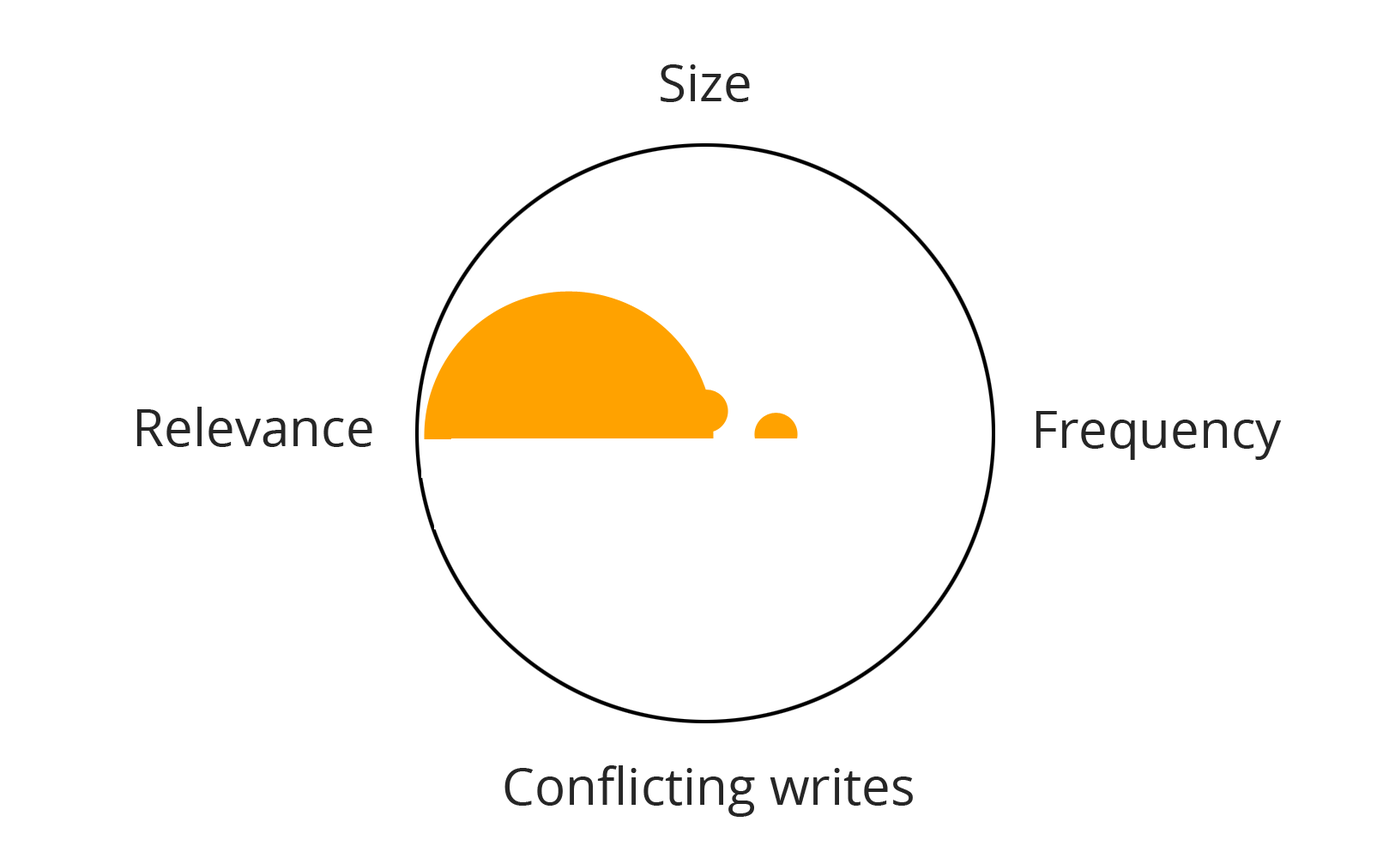
<style>
.page{position:relative;width:1389px;height:858px;background:#ffffff}
.page>*{position:absolute;margin:0}
.t1{font:51.5px "OpenSans";color:#262626}
</style>
<div class="page">
<p class="t1" style="left:661px;top:64px;width:89px;height:38px">Size</p>
<p class="t1" style="left:136px;top:407px;width:236px;height:40px">Relevance</p>
<p class="t1" style="left:1036px;top:411px;width:246px;height:49px">Frequency</p>
<p class="t1" style="left:505px;top:766px;width:408px;height:51px">Conflicting writes</p>
</div>
